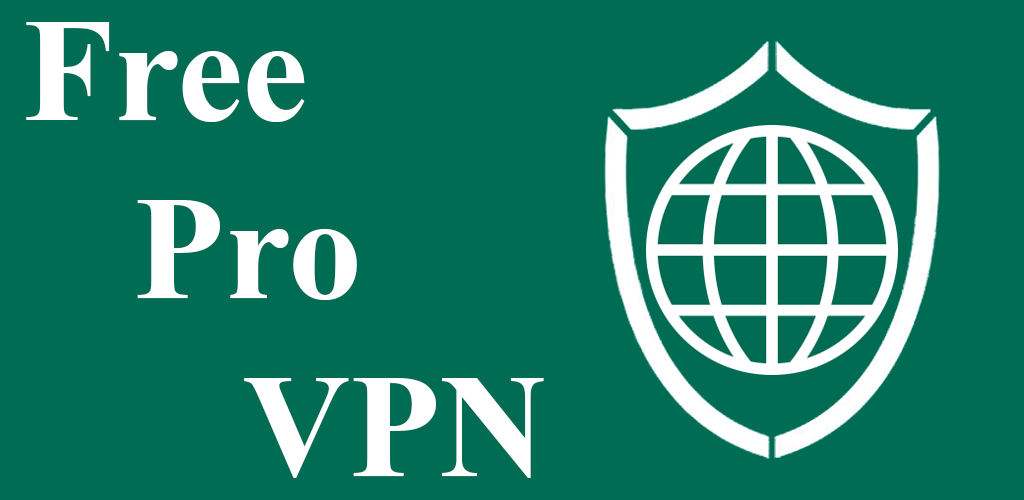
<style>
.page{position:relative;width:1024px;height:500px;background:#006c54}
.page>*{position:absolute;margin:0}
.t1{font:148.2px "TimesNewRomanPS-BoldMT";color:#ffffff}
</style>
<div class="page">
<p class="t1" style="left:26px;top:22px;width:518px;height:456px">Free <br>   Pro <br>      VPN</p>
</div>
